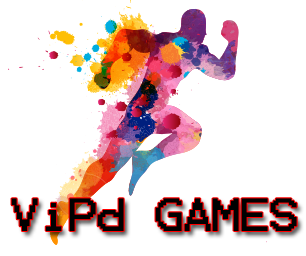
<style>
.page{position:relative;width:306px;height:256px;background:#ffffff}
.page>*{position:absolute;margin:0}
.t1{font:37.5px "Terminal";letter-spacing:-0.06em;color:#010101;scale:1.11 1}
</style>
<div class="page">
<p class="t1" style="left:11px;top:198px;width:286px;height:33px">ViPd GAMES</p>
</div>
